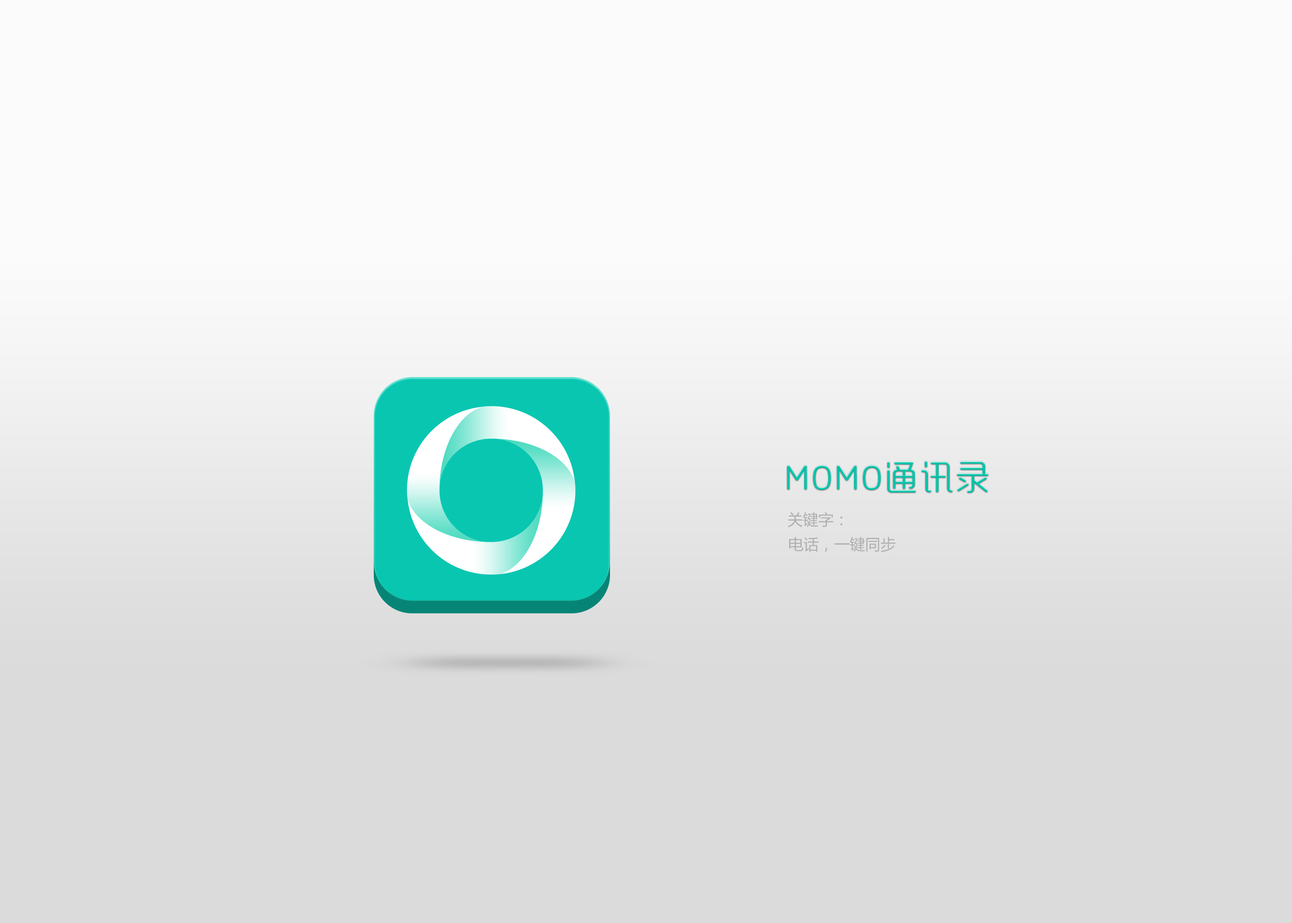
<style>
.page{position:relative;width:1292px;height:923px;background:#fbfbfb}
.page>*{position:absolute;margin:0}
.t1{font:34.6px "RTWSYueRoudGoDemo-Regular";color:#01c3a9;font-weight:bold}
.t2{font:15.4px "MicrosoftYaHei";color:#aeaeae}
.t3{font:15.4px "MicrosoftYaHei";color:#afafaf}
</style>
<div class="page">
<p class="t1" style="left:787px;top:461px;width:201px;height:32px">MOMO通讯录</p>
<p class="t2" style="left:788px;top:512px;width:55px;height:15px">关键字：</p>
<p class="t3" style="left:789px;top:537px;width:107px;height:15px">电话，一键同步</p>
</div>
